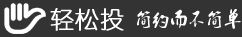
<style>
.page{position:relative;width:242px;height:37px;background:#333333}
.page>*{position:absolute;margin:0}
.t1{font:24px "YouYuan";color:#ffffff;font-weight:bold}
.t2{font:18px "Ò¶¸ùÓÑÃ«±ÊÐÐÊé¼òÌå";color:#ffffff}
</style>
<div class="page">
<p class="t1" style="left:50px;top:8px;width:74px;height:23px">轻松投</p>
<p class="t2" style="left:137px;top:9px;width:104px;height:20px">简约而不简单</p>
</div>
